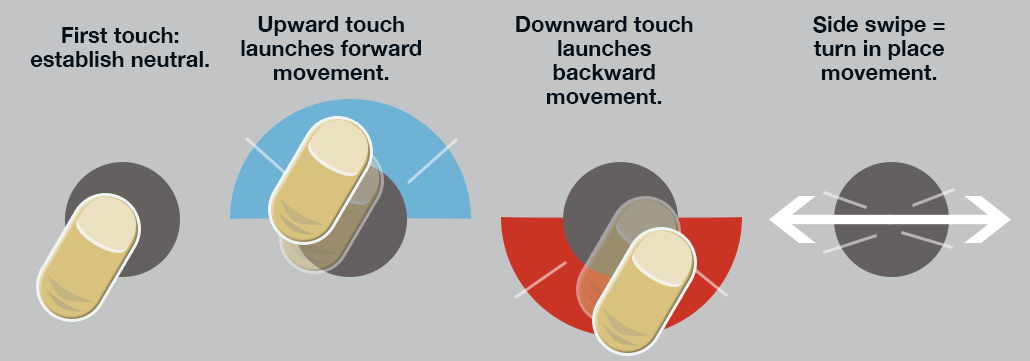
<style>
.page{position:relative;width:1030px;height:361px;background:#c3c4c5}
.page>*{position:absolute;margin:0}
.t1{font:22px/24px "HelveticaNeue-Bold";color:#05111a}
</style>
<div class="page">
<p class="t1" style="left:241px;top:16px;width:180px;height:64px;text-align:center">Upward touch launches forward movement.</p>
<p class="t1" style="left:516px;top:16px;width:177px;height:88px;text-align:center">Downward touch launches backward movement.</p>
<p class="t1" style="left:813px;top:16px;width:132px;height:64px;text-align:center">Side swipe =<br>turn in place movement.</p>
<p class="t1" style="left:30px;top:27px;width:179px;height:40px;text-align:center">First touch: establish neutral.</p>
</div>
